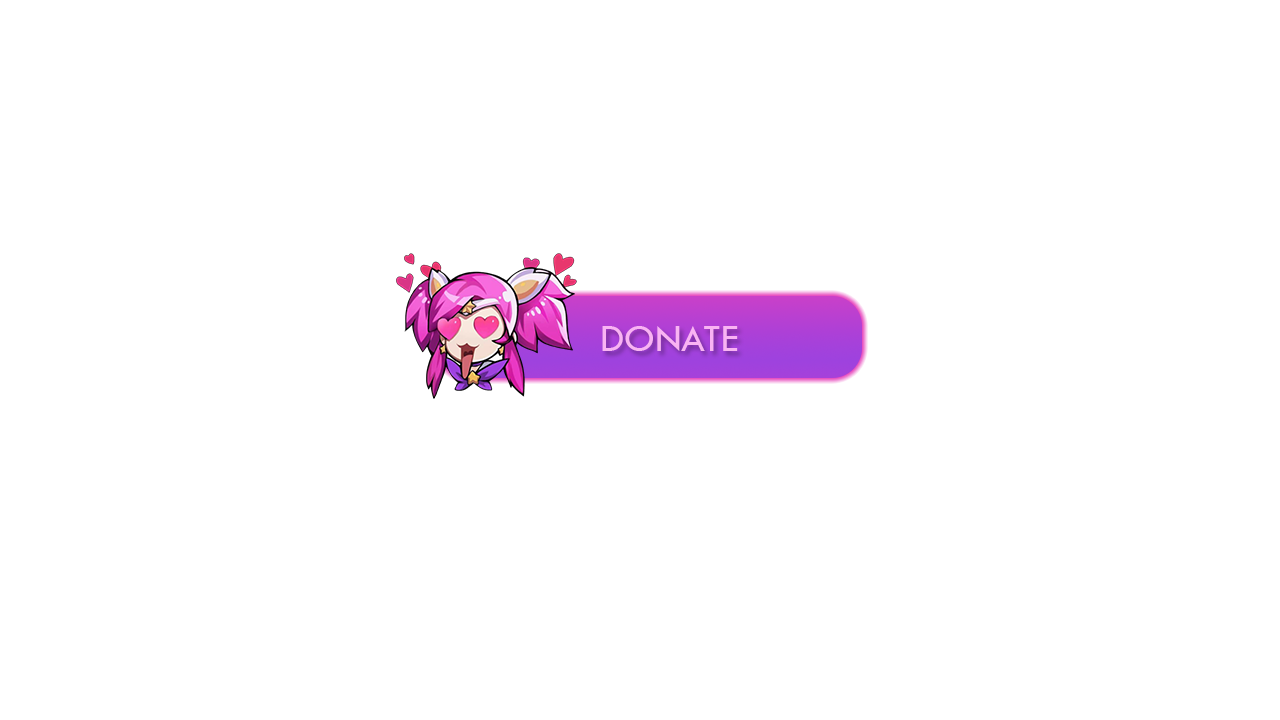
<style>
.page{position:relative;width:1280px;height:720px;background:#ffffff}
.page>*{position:absolute;margin:0}
.t1{font:40px "TwCenMT-Regular";color:#f9b3f3}
</style>
<div class="page">
<p class="t1" style="left:602px;top:326px;width:136px;height:25px">DONATE</p>
</div>
